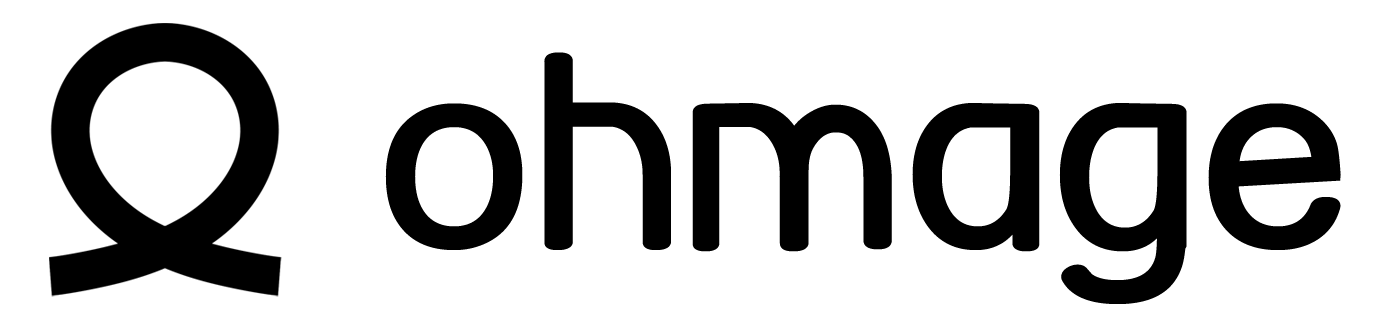
<style>
.page{position:relative;width:1384px;height:323px;background:#ffffff}
.page>*{position:absolute;margin:0}
.t1{font:270.8px "StreetCornerBold";color:#000000}
</style>
<div class="page">
<p class="t1" style="left:385px;top:52px;width:956px;height:252px">ohmage</p>
</div>
